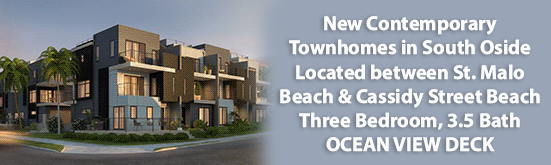
<style>
.page{position:relative;width:551px;height:165px;background:#99a5b6}
.page>*{position:absolute;margin:0}
.t1{font:20.1px "MyriadConceptRoman-Bold";color:#fcfcfc}
</style>
<div class="page">
<p class="t1" style="left:280px;top:16px;width:260px;height:136px;text-align:center">New Contemporary Townhomes in South Oside Located between St. Malo Beach &amp; Cassidy Street Beach Three Bedroom, 3.5 Bath OCEAN VIEW DECK</p>
</div>
